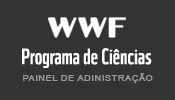
<style>
.page{position:relative;width:175px;height:100px;background:#333333}
.page>*{position:absolute;margin:0}
.t1{font:21.8px "WWF";color:#ffffff}
.t2{font:8.3px "ArialMT";letter-spacing:0.05em;color:#9a9a9a;font-weight:bold;scale:1.08 1}
</style>
<div class="page">
<p class="t1" style="left:22px;top:48px;width:130px;height:20px">Programa de Ciências</p>
<p class="t2" style="left:23px;top:73px;width:130px;height:10px">PAINEL DE ADINISTRAÇÃO</p>
</div>
